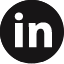
<style>
.page{position:relative;width:64px;height:64px;background:#171516}
.page>*{position:absolute;margin:0}
.t1{font:49px "MyriadPro-Bold";letter-spacing:0.01em;color:#ffffff}
</style>
<div class="page">
<p class="t1" style="left:14px;top:12px;width:38px;height:36px">in</p>
</div>
